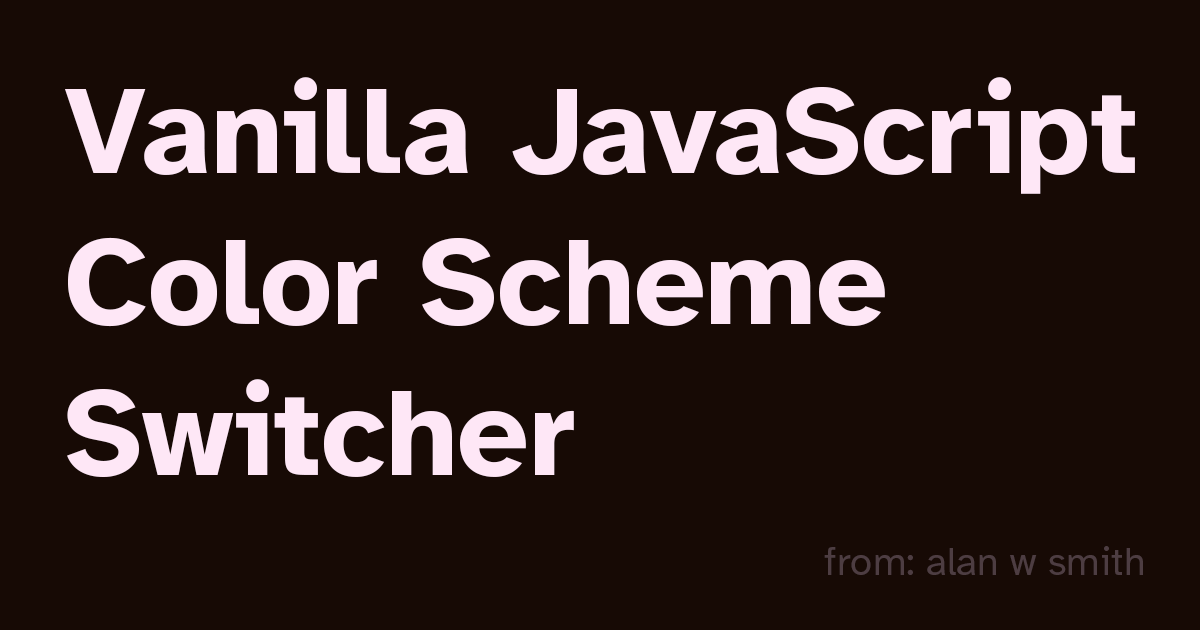
<style>
.page{position:relative;width:1200px;height:630px;background:#170a05}
.page>*{position:absolute;margin:0}
.t1{font:126px "AtkinsonHyperlegible-Bold";color:#fee7f6}
.t2{font:40px "AtkinsonHyperlegible-Regular";color:#4d3d42}
</style>
<div class="page">
<p class="t1" style="left:65px;top:77px;width:1070px;height:400px">Vanilla JavaScript<br>Color Scheme <br>Switcher</p>
<p class="t2" style="left:824px;top:546px;width:319px;height:29px">from: alan w smith</p>
</div>
